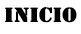
<style>
.page{position:relative;width:81px;height:34px;background:#ffffff}
.page>*{position:absolute;margin:0}
.t1{font:21.4px "Stencil";color:#000000;font-weight:bold;scale:1.05 1}
</style>
<div class="page">
<p class="t1" style="left:5px;top:7px;width:72px;height:16px">INICIO</p>
</div>
